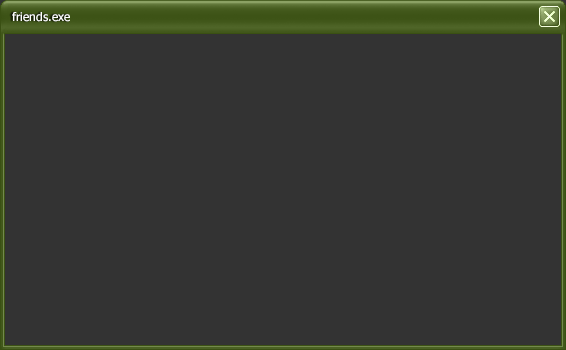
<style>
.page{position:relative;width:566px;height:350px;background:#333333}
.page>*{position:absolute;margin:0}
.t1{font:12px "Tahoma";color:#ffffff}
</style>
<div class="page">
<p class="t1" style="left:12px;top:12px;width:58px;height:10px">friends.exe</p>
</div>
